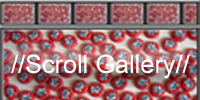
<style>
.page{position:relative;width:200px;height:100px}
.page>*{position:absolute;margin:0}
.t1{font:25.3px "ArialMT";color:#ffffff}
</style>
<div class="page">
<p class="t1" style="left:11px;top:54px;width:179px;height:25px">//Scroll Gallery//</p>
</div>
